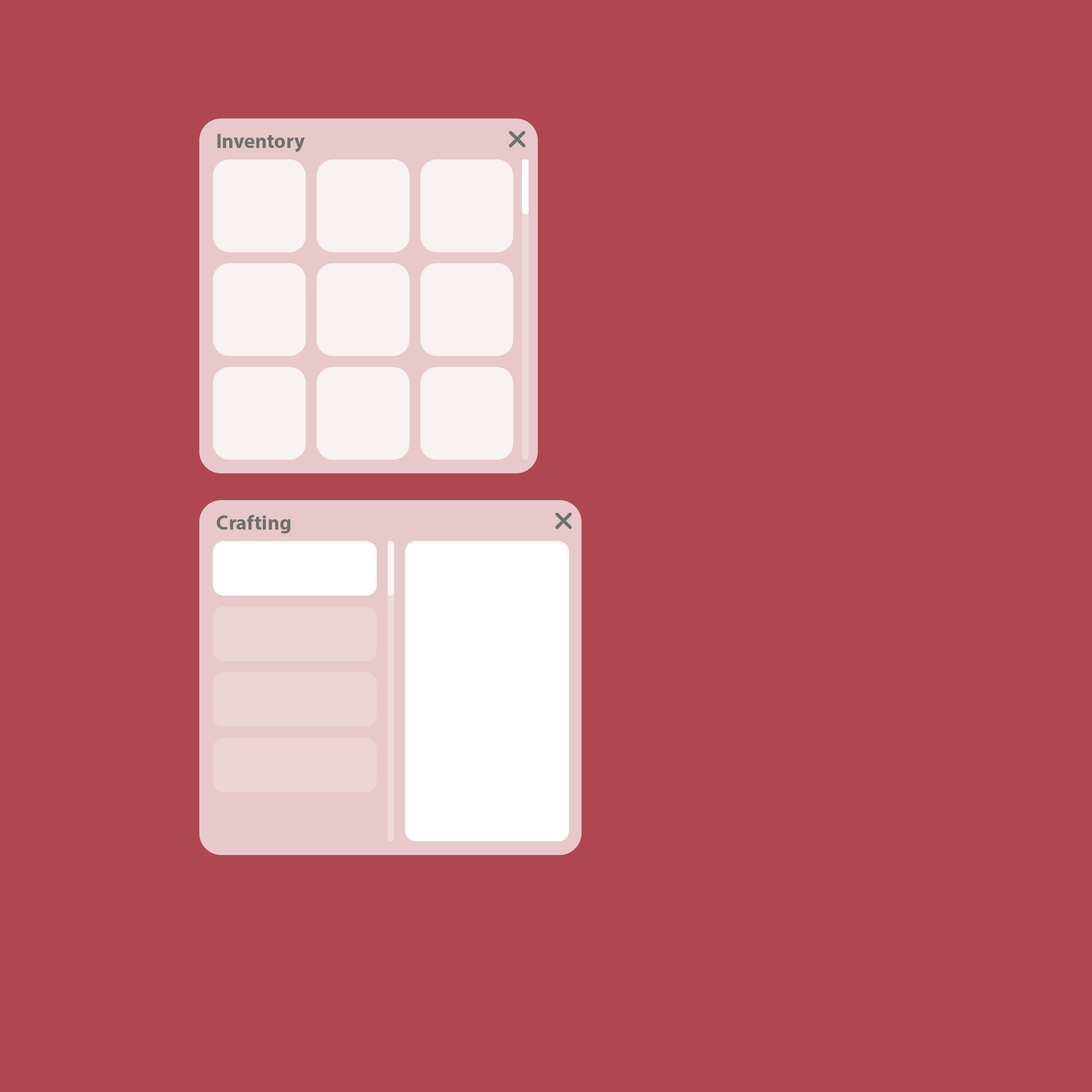
<style>
.page{position:relative;width:1092px;height:1092px;background:#ae4752}
.page>*{position:absolute;margin:0}
.t1{font:20.5px "MyriadPro-Bold";color:#6f6f6f}
</style>
<div class="page">
<p class="t1" style="left:217px;top:134px;width:88px;height:18px">Inventory</p>
<p class="t1" style="left:217px;top:515px;width:73px;height:18px">Crafting</p>
</div>
